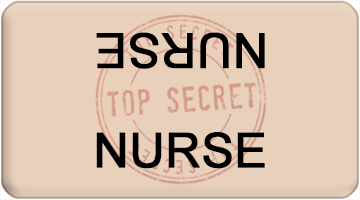
<style>
.page{position:relative;width:360px;height:200px;background:#e8d0bb}
.page>*{position:absolute;margin:0}
.t1{font:48px "ArialMT";color:#000000;font-weight:bold}
</style>
<div class="page">
<p class="t1" style="left:96px;top:32px;width:169px;height:37px;rotate:180deg">NURSE</p>
<p class="t1" style="left:96px;top:132px;width:169px;height:37px">NURSE</p>
</div>
